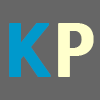
<style>
.page{position:relative;width:100px;height:100px;background:#666666}
.page>*{position:absolute;margin:0}
.t1{font:72px "NanumGothicExtraBold";color:#0099cc;font-weight:bold}
.t2{font:72px "NanumGothicExtraBold";color:#ffffcc;font-weight:bold}
</style>
<div class="page">
<p class="t1" style="left:9px;top:23px;width:85px;height:54px">K<span class="t2">P</span></p>
</div>
